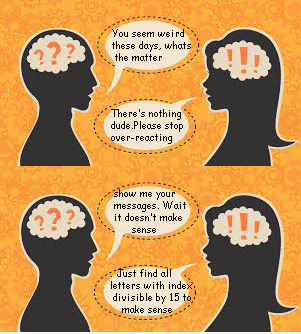
<style>
.page{position:relative;width:301px;height:334px}
.page>*{position:absolute;margin:0}
.t1{font:10px "ComicSansMS";color:#000000}
</style>
<div class="page">
<p class="t1" style="left:112px;top:29px;width:79px;height:32px">You seem weird<br>these days, whats<br> the matter</p>
<p class="t1" style="left:111px;top:109px;width:72px;height:35px">There’s nothing <br>dude.Please stop<br>over-reacting</p>
<p class="t1" style="left:114px;top:189px;width:72px;height:44px">show me your <br>messages. Wait <br>it doesn’t make <br>      sense</p>
<p class="t1" style="left:111px;top:269px;width:81px;height:44px">. Just find all <br>letters with index<br> divisible by 15 to<br>    make sense</p>
</div>
